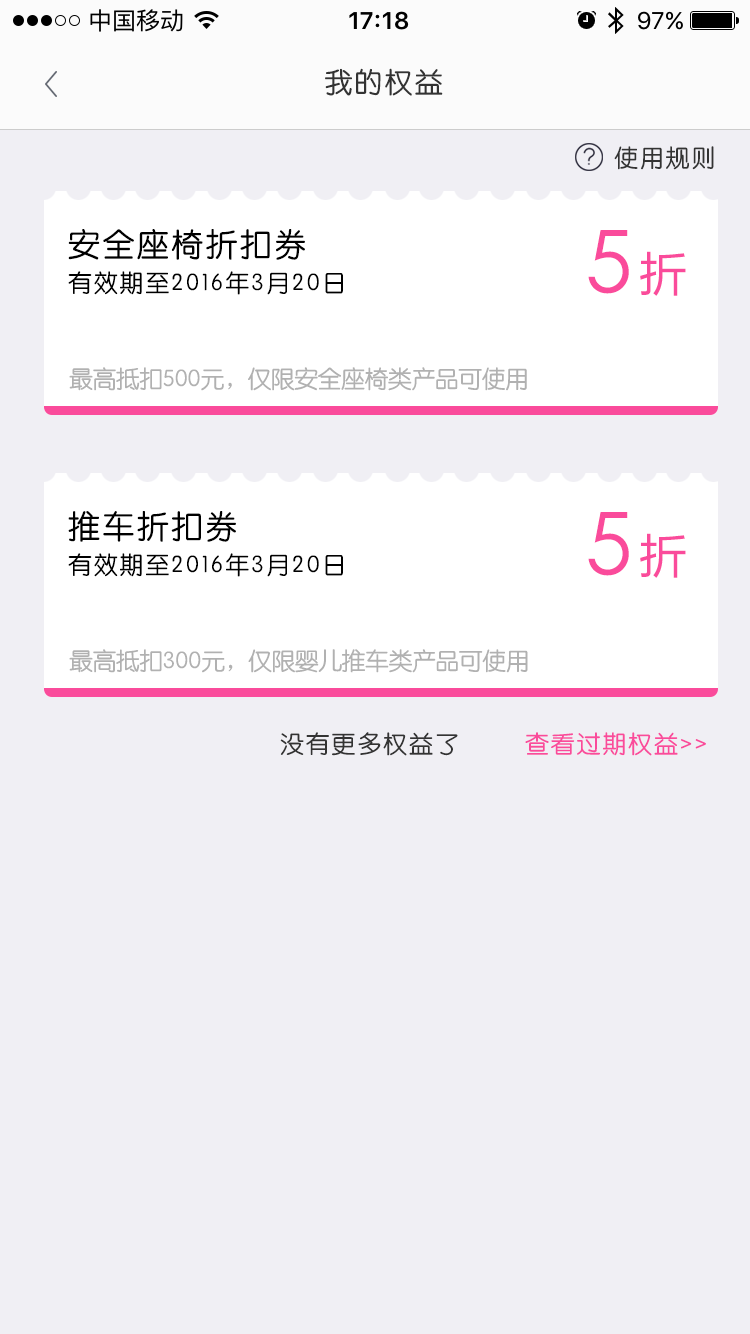
<style>
.page{position:relative;width:750px;height:1334px;background:#f0eff4}
.page>*{position:absolute;margin:0}
.t1{font:28px "STYuanti-SC-Regular";letter-spacing:0.075em;color:#333333}
.t2{font:24px "STYuanti-SC-Regular";letter-spacing:0.075em;color:#333333}
.t3{font:32px "STYuanti-SC-Regular";letter-spacing:0.075em;color:#000000}
.t4{font:86px "STHeiti";letter-spacing:0.075em;color:#fa4b9b}
.t5{font:48px "FZLTHK_ZJRB--GBK1-0";letter-spacing:0.075em;color:#fa4b9b}
.t6{font:24px "STYuanti-SC-Regular";letter-spacing:0.075em;color:#000000}
.t7{font:24px "STYuanti-SC-Regular";letter-spacing:-0.025em;color:#b1b1b1}
.t8{font:24px "STYuanti-SC-Regular";letter-spacing:0.075em;color:#fa4b9b}
</style>
<div class="page">
<p class="t1" style="left:325px;top:68px;width:118px;height:28px">我的权益</p>
<p class="t2" style="left:614px;top:146px;width:100px;height:24px">使用规则</p>
<p class="t3" style="left:68px;top:229px;width:237px;height:31px">安全座椅折扣券</p>
<p class="t4" style="left:588px;top:230px;width:41px;height:64px">5</p>
<p class="t5" style="left:640px;top:251px;width:46px;height:45px">折</p>
<p class="t6" style="left:68px;top:271px;width:275px;height:24px">有效期至2016年3月20日</p>
<p class="t7" style="left:69px;top:367px;width:458px;height:24px">最高抵扣500元，仅限安全座椅类产品可使用</p>
<p class="t3" style="left:68px;top:511px;width:168px;height:31px">推车折扣券</p>
<p class="t4" style="left:588px;top:512px;width:41px;height:64px">5</p>
<p class="t5" style="left:640px;top:533px;width:46px;height:45px">折</p>
<p class="t6" style="left:68px;top:553px;width:275px;height:24px">有效期至2016年3月20日</p>
<p class="t7" style="left:69px;top:649px;width:459px;height:24px">最高抵扣300元，仅限婴儿推车类产品可使用</p>
<p class="t2" style="left:280px;top:732px;width:178px;height:24px">没有更多权益了</p>
<p class="t8" style="left:525px;top:732px;width:181px;height:24px">查看过期权益&gt;&gt;</p>
</div>
